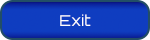
<style>
.page{position:relative;width:150px;height:40px;background:#0f3dc0}
.page>*{position:absolute;margin:0}
.t1{font:15px "Orbitron-Regular";color:#ffffff}
</style>
<div class="page">
<p class="t1" style="left:60px;top:14px;width:31px;height:12px">Exit</p>
</div>
